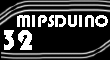
<style>
.page{position:relative;width:110px;height:60px;background:#000000}
.page>*{position:absolute;margin:0}
.t1{font:18px "Bauhaus93";color:#ffffff}
.t2{font:30px "Bauhaus93";color:#ffffff}
</style>
<div class="page">
<p class="t1" style="left:17px;top:15px;width:91px;height:12px">MIPSDUINO</p>
<p class="t2" style="left:4px;top:30px;width:28px;height:20px">32</p>
</div>
